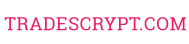
<style>
.page{position:relative;width:189px;height:44px;background:#ffffff}
.page>*{position:absolute;margin:0}
.t1{font:18px "RobotoSlab-Regular";letter-spacing:0.035em;color:#e91e63;text-transform:uppercase}
</style>
<div class="page">
<p class="t1" style="left:4px;top:17px;width:182px;height:14px">tradescrypt.com</p>
</div>
